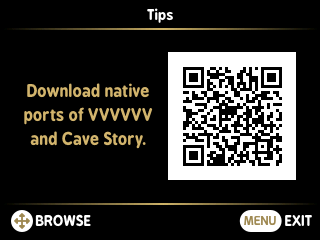
<style>
.page{position:relative;width:320px;height:240px;background:#000000}
.page>*{position:absolute;margin:0}
.t1{font:14px "BPreplay-Bold";color:#ffffff}
.t2{font:16px/24px "BPreplay-Bold";color:#d2b46c}
</style>
<div class="page">
<p class="t1" style="left:147px;top:8px;width:26px;height:15px">Tips</p>
<p class="t2" style="left:24px;top:83px;width:129px;height:66px;text-align:center">Download native<br>ports of VVVVVV<br>and Cave Story.</p>
<p class="t1" style="left:35px;top:214px;width:56px;height:13px">BROWSE</p>
<p class="t1" style="left:285px;top:215px;width:27px;height:11px">EXIT</p>
</div>
